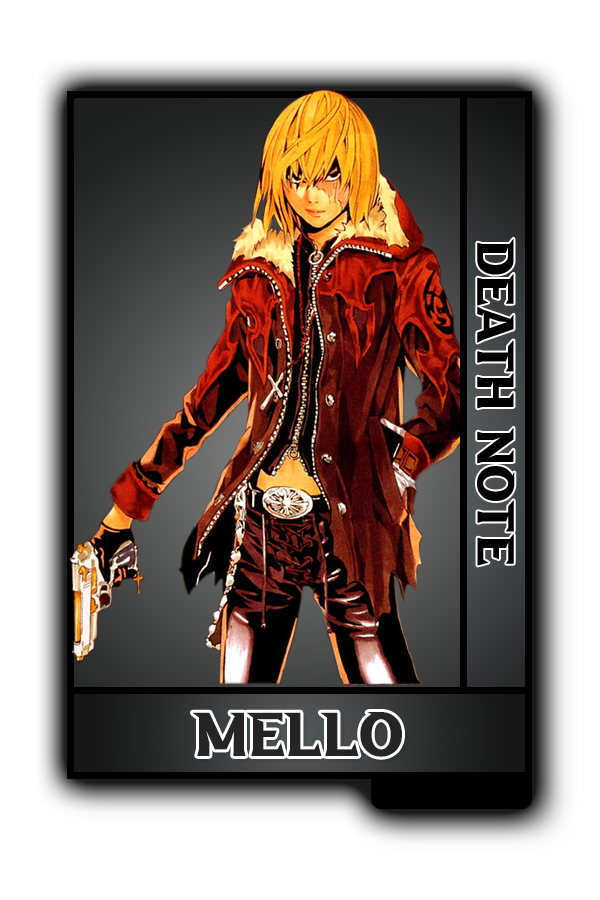
<style>
.page{position:relative;width:600px;height:900px;background:#ffffff}
.page>*{position:absolute;margin:0}
.t1{font:48.8px "aAbsoluteEmpire";color:#000000}
.t2{font:58.3px "aAbsoluteEmpire";color:#252525}
</style>
<div class="page">
<p class="t1" style="left:477px;top:238px;width:38px;height:328px;rotate:90deg">Death Note</p>
<p class="t2" style="left:192px;top:712px;width:210px;height:45px">Mello</p>
</div>
